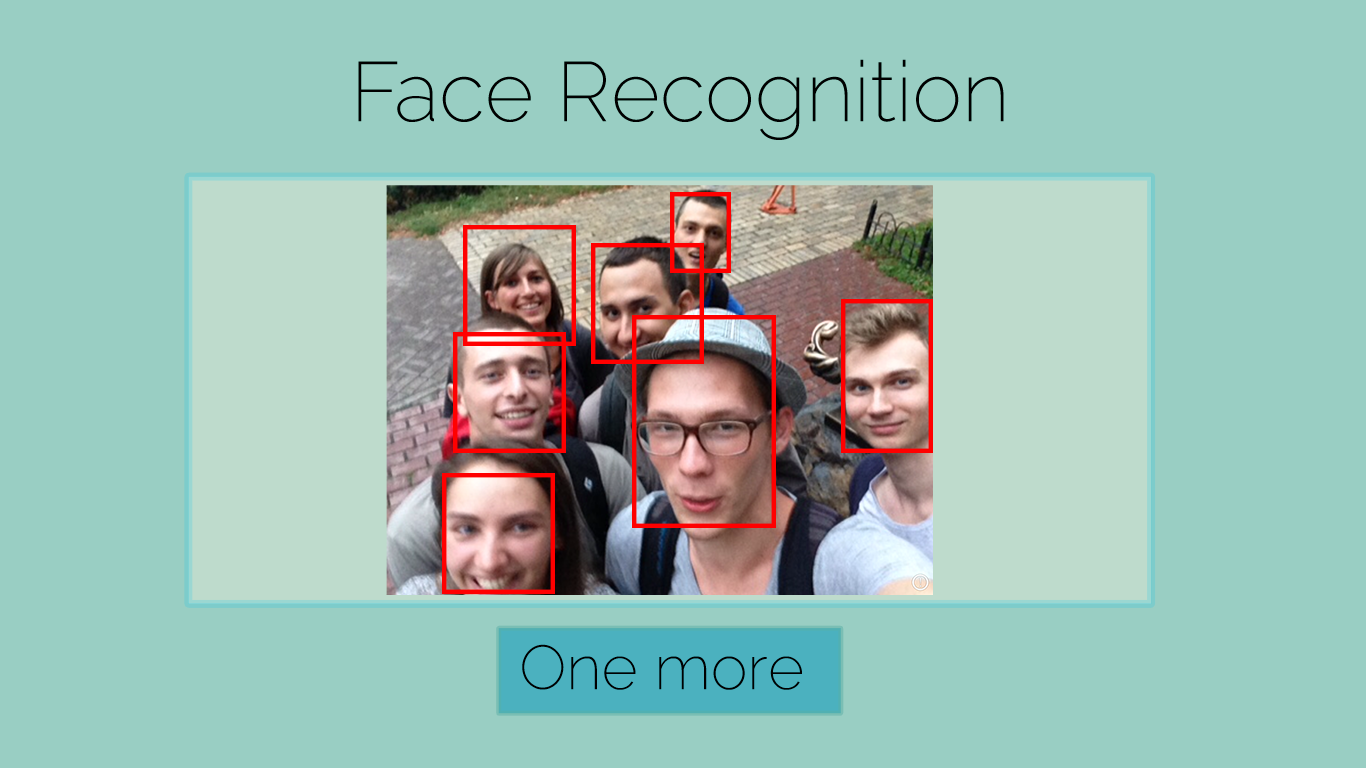
<style>
.page{position:relative;width:1366px;height:768px;background:#99cec3}
.page>*{position:absolute;margin:0}
.t1{font:84.2px "Raleway-ExtraLight";color:#000000}
.t2{font:62.2px "Raleway-ExtraLight";color:#000000}
</style>
<div class="page">
<p class="t1" style="left:358px;top:59px;width:646px;height:81px">Face Recognition</p>
<p class="t2" style="left:522px;top:644px;width:280px;height:46px">One more</p>
</div>
